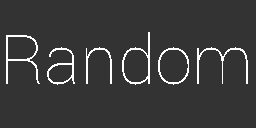
<style>
.page{position:relative;width:256px;height:128px;background:#333333}
.page>*{position:absolute;margin:0}
.t1{font:68px "Roboto-Thin";color:#ffffff}
</style>
<div class="page">
<p class="t1" style="left:6px;top:32px;width:242px;height:53px">Random</p>
</div>
